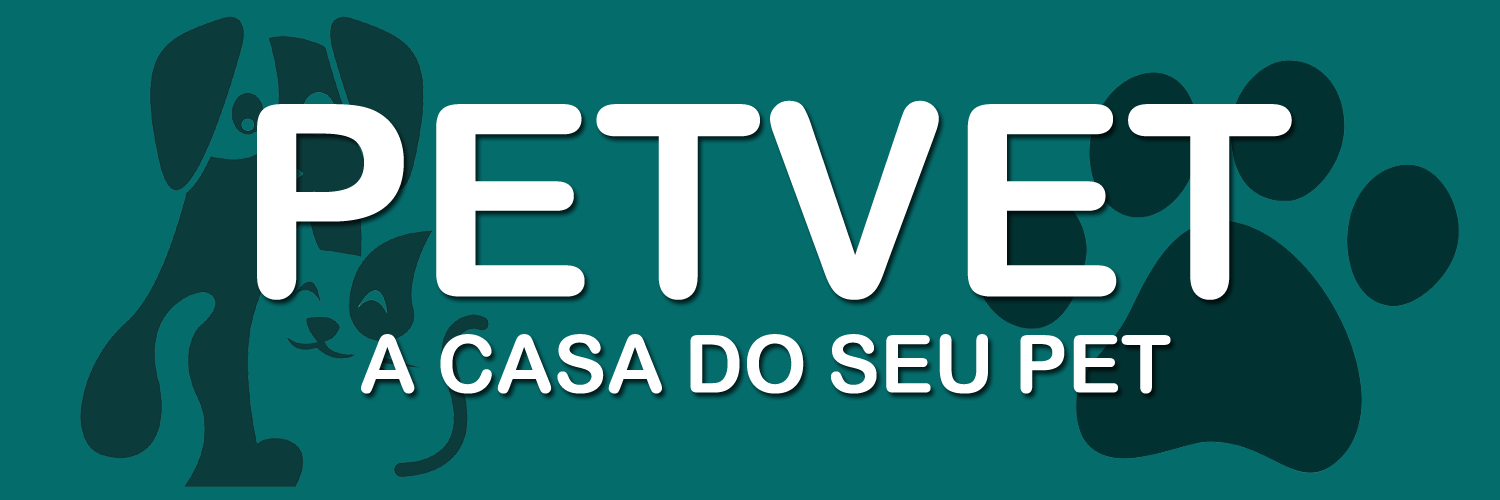
<style>
.page{position:relative;width:1500px;height:500px;background:#056c6c}
.page>*{position:absolute;margin:0}
.t1{font:80px "ArialRoundedMTBold";color:#ffffff}
.t2{font:268.5px "ArialRoundedMTBold";color:#ffffff}
</style>
<div class="page">
<p class="t1" style="left:257px;top:100px;width:1035px;height:294px;text-align:center"><span class="t2">PETVET<br></span>A CASA DO SEU PET</p>
</div>
